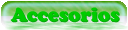
<style>
.page{position:relative;width:128px;height:30px}
.page>*{position:absolute;margin:0}
.t1{font:19.9px "CooperBlack";color:#00cc00}
</style>
<div class="page">
<p class="t1" style="left:11px;top:8px;width:109px;height:15px">Accesorios</p>
</div>
